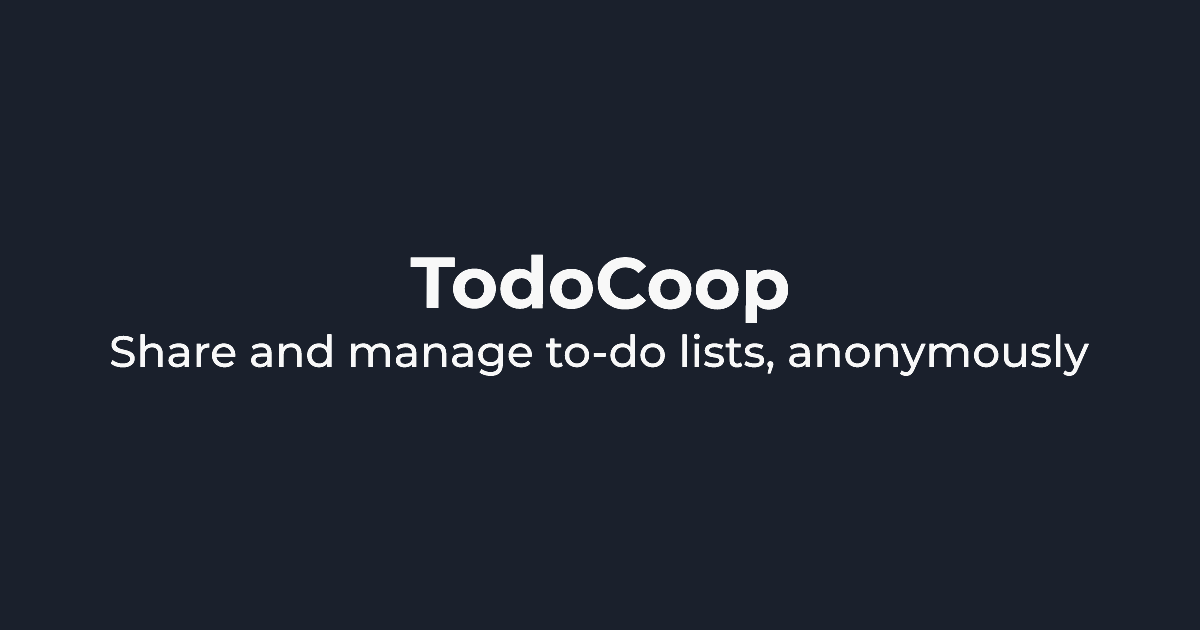
<style>
.page{position:relative;width:1200px;height:630px;background:#1a202c}
.page>*{position:absolute;margin:0}
.t1{font:72px "Montserrat-Bold";color:#f8f8f8}
.t2{font:44px "Montserrat-Medium";color:#f8f8f8}
</style>
<div class="page">
<p class="t1" style="left:410px;top:254px;width:379px;height:69px">TodoCoop</p>
<p class="t2" style="left:110px;top:333px;width:979px;height:43px">Share and manage to-do lists, anonymously</p>
</div>
